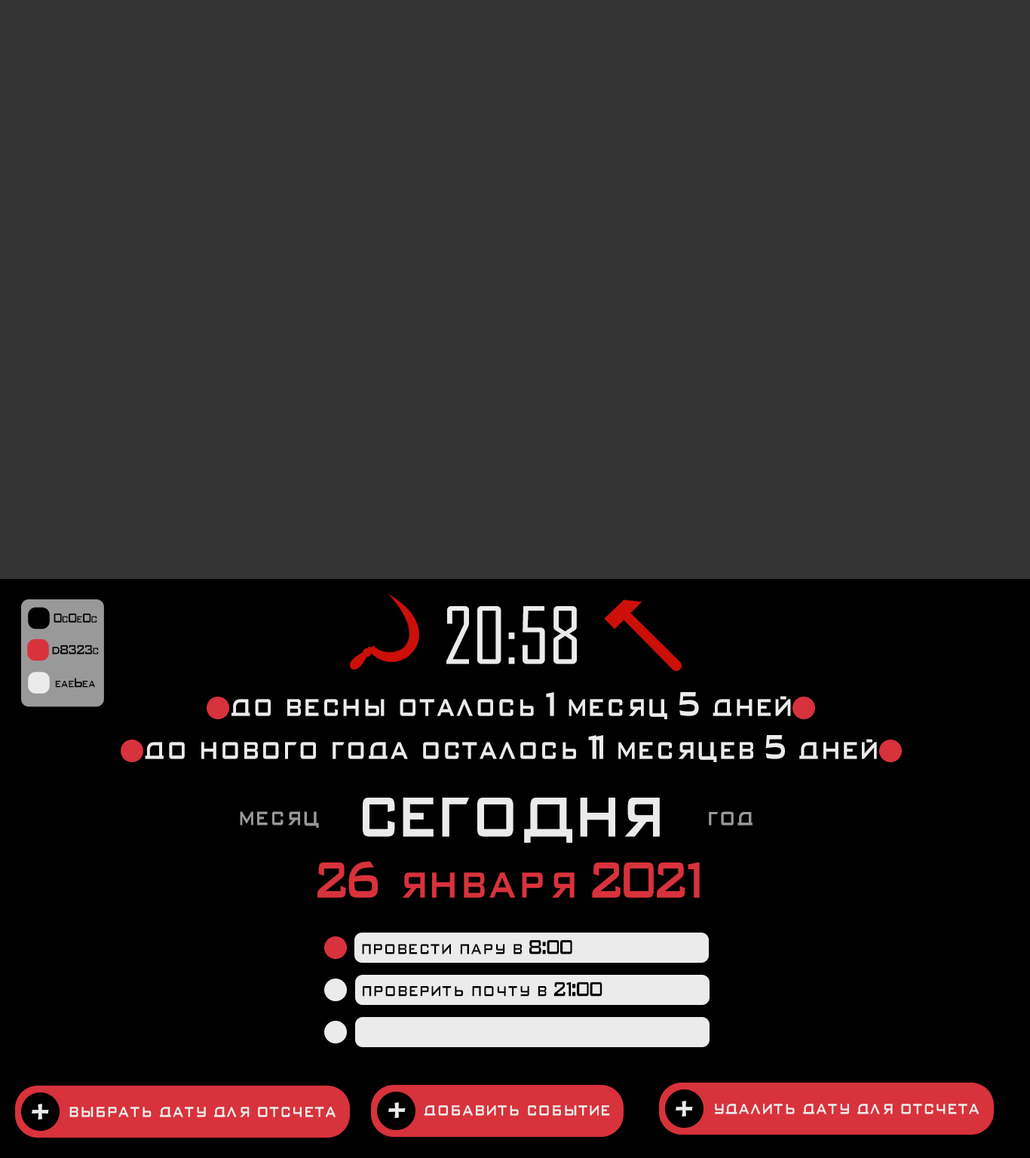
<style>
.page{position:relative;width:1030px;height:1158px;background:#333333}
.page>*{position:absolute;margin:0}
.t1{font:17.5px "VTMB_DlgIntimidation3";color:#000000}
.t2{font:75.4px "AgencyFB-Reg";color:#eaebea}
.t3{font:45.2px "VTMB_DlgIntimidation3";color:#eaebea}
.t4{font:75.4px "VTMB_DlgIntimidation3";color:#eaebea}
.t5{font:36.2px "VTMB_DlgIntimidation3";color:#999999}
.t6{font:67.8px "VTMB_DlgIntimidation3";color:#d8323c}
.t7{font:27.1px "VTMB_DlgIntimidation3";color:#000000}
.t8{font:36.2px "Moyenage";color:#eaebea}
.t9{font:27.1px "VTMB_DlgIntimidation3";color:#eaebea}
</style>
<div class="page">
<p class="t1" style="left:54px;top:613px;width:43px;height:10px">0c0e0c</p>
<p class="t2" style="left:446px;top:606px;width:131px;height:58px">20:58</p>
<p class="t1" style="left:52px;top:645px;width:47px;height:9px">d8323c</p>
<p class="t1" style="left:55px;top:678px;width:41px;height:10px">eaebea</p>
<p class="t3" style="left:231px;top:692px;width:560px;height:27px">до весны оталось 1 месяц 5 дней</p>
<p class="t3" style="left:145px;top:735px;width:732px;height:27px">до нового года осталось 11 месяцев 5 дней</p>
<p class="t4" style="left:363px;top:798px;width:297px;height:45px">СЕГОДНЯ</p>
<p class="t5" style="left:240px;top:811px;width:79px;height:17px">месяц</p>
<p class="t5" style="left:709px;top:811px;width:43px;height:14px">год</p>
<p class="t6" style="left:317px;top:861px;width:383px;height:37px">26 января 2021</p>
<p class="t7" style="left:362px;top:940px;width:210px;height:14px">провести пару в 8:00</p>
<p class="t7" style="left:363px;top:982px;width:239px;height:15px">проверить почту в 21:00</p>
<p class="t8" style="left:32px;top:1104px;width:17px;height:15px">+</p>
<p class="t9" style="left:69px;top:1107px;width:266px;height:10px">выбрать дату для отсчета</p>
<p class="t8" style="left:388px;top:1102px;width:18px;height:16px">+</p>
<p class="t9" style="left:424px;top:1105px;width:186px;height:11px">добавить событие</p>
<p class="t8" style="left:675px;top:1101px;width:18px;height:15px">+</p>
<p class="t9" style="left:715px;top:1104px;width:264px;height:10px">удалить дату для отсчета</p>
</div>
